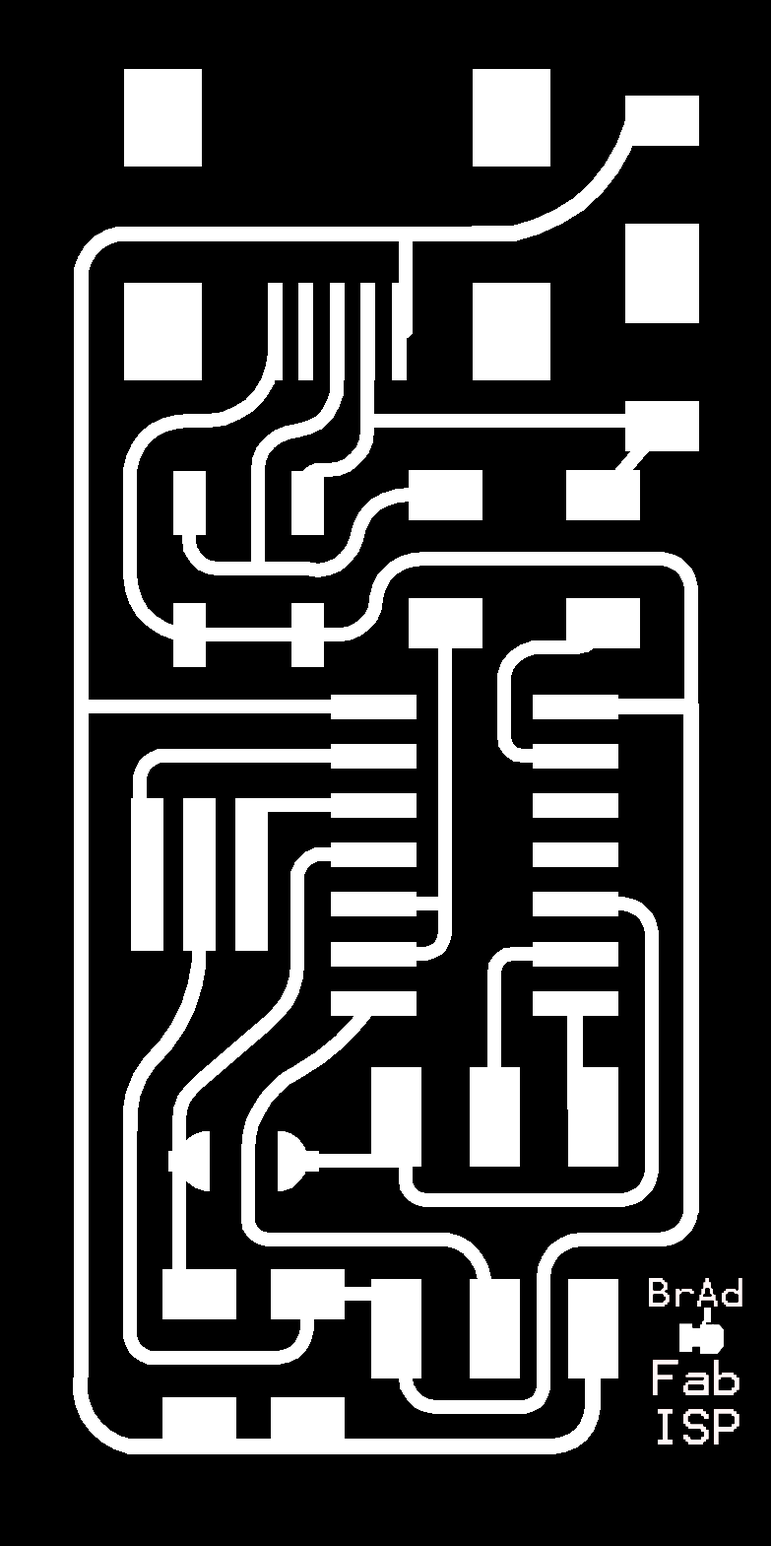
<style>
.page{position:relative;width:771px;height:1546px;background:#000000}
.page>*{position:absolute;margin:0}
.t1{font:41.1px "Terminal";color:#fff8f8}
.t2{font:32.5px "Terminal";color:#fff8f8}
</style>
<div class="page">
<p class="t1" style="left:649px;top:1278px;width:94px;height:166px;text-align:center"><span class="t2">BrAd<br><br></span>Fab<br>ISP</p>
</div>
